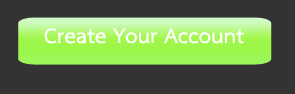
<style>
.page{position:relative;width:295px;height:94px;background:#333333}
.page>*{position:absolute;margin:0}
.t1{font:30px "THSarabunPSK-Bold";color:#ffffff}
</style>
<div class="page">
<p class="t1" style="left:44px;top:28px;width:200px;height:16px">Create Your Account</p>
</div>
